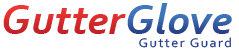
<style>
.page{position:relative;width:239px;height:49px;background:#ffffff}
.page>*{position:absolute;margin:0}
.t1{font:44px "Corbel-BoldItalic";color:#d22a2c}
.t2{font:44px "Corbel-BoldItalic"}
.t3{font:13px "Corbel";letter-spacing:0.1em;color:#253e88;scale:1.1 1}
</style>
<div class="page">
<p class="t1" style="left:3px;top:5px;width:123px;height:29px">Gutter</p>
<p class="t2" style="left:127px;top:3px;width:105px;height:31px">Glove</p>
<p class="t3" style="left:139px;top:37px;width:92px;height:11px">Gutter Guard</p>
</div>
